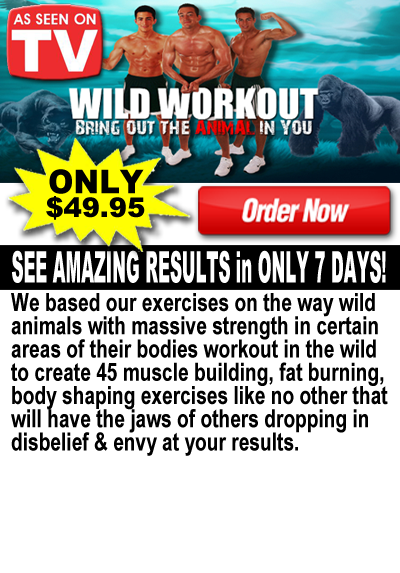
<style>
.page{position:relative;width:400px;height:573px;background:#ffffff}
.page>*{position:absolute;margin:0}
.t1{font:32.8px "Arial-Black";color:#000000;scale:0.94 1}
.t2{font:27.2px "Arial-Black";color:#000000}
.t3{font:43.9px "Arial-Black";color:#ffffff;scale:0.38 1}
.t4{font:25.4px/23.2px "ArialNarrow-Bold";color:#000000;scale:0.92 1}
</style>
<div class="page">
<p class="t1" style="left:49px;top:169px;width:95px;height:25px">ONLY</p>
<p class="t2" style="left:46px;top:196px;width:99px;height:24px">$49.95</p>
<p class="t3" style="left:12px;top:250px;width:374px;height:33px">SEE AMAZING RESULTS in ONLY 7 DAYS!</p>
<p class="t4" style="left:11px;top:293px;width:377px;height:163px">We based our exercises on the way wild <br>animals with massive strength in certain <br>areas of their bodies workout in the wild <br>to create 45 muscle building, fat burning, <br>body shaping exercises like no other that <br>will have the jaws of others dropping in <br>disbelief &amp; envy at your results.</p>
</div>
